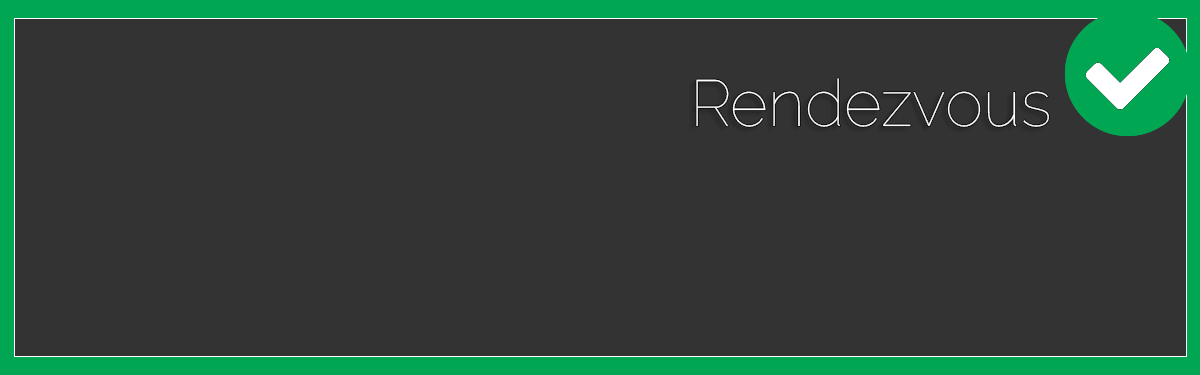
<style>
.page{position:relative;width:1200px;height:375px;background:#333333}
.page>*{position:absolute;margin:0}
.t1{font:65px "Raleway-Thin";color:#ffffff}
</style>
<div class="page">
<p class="t1" style="left:696px;top:78px;width:353px;height:49px">Rendezvous</p>
</div>
